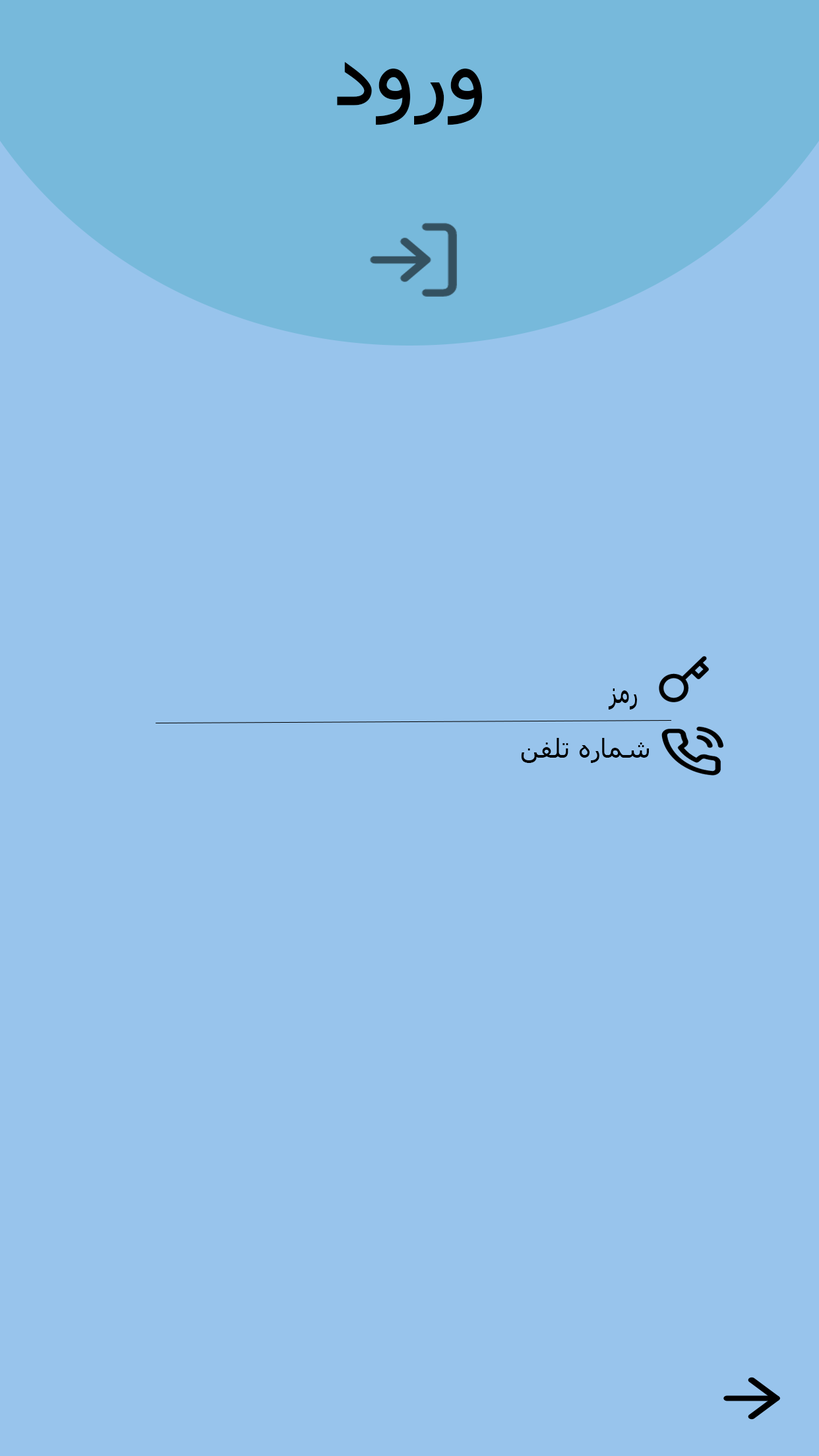
<style>
.page{position:relative;width:819px;height:1456px;background:#98c4ec}
.page>*{position:absolute;margin:0}
.t1{font:92.3px "Tahoma";color:#000000}
.t2{font:33px "Tahoma";color:#000000;scale:0.68 1}
.t3{font:26.4px "Tahoma";color:#000000}
</style>
<div class="page">
<p class="t1" style="left:337px;top:62px;width:145px;height:63px">ورود</p>
<p class="t2" style="left:608px;top:688px;width:29px;height:22px">رمز</p>
<p class="t3" style="left:521px;top:738px;width:128px;height:25px">شماره تلفن</p>
</div>
